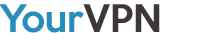
<style>
.page{position:relative;width:200px;height:42px;background:#ffffff}
.page>*{position:absolute;margin:0}
.t1{font:34.7px "KeepCalm-Medium";color:#278dbd}
.t2{font:34.7px "KeepCalm-Medium";color:#3e3737}
</style>
<div class="page">
<p class="t1" style="left:0px;top:4px;width:160px;height:29px">Your<span class="t2">VPN</span></p>
</div>
